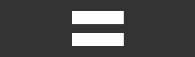
<style>
.page{position:relative;width:195px;height:57px;background:#333333}
.page>*{position:absolute;margin:0}
.t1{font:116.7px "PTSans-Bold";color:#fefefe}
</style>
<div class="page">
<p class="t1" style="left:72px;top:11px;width:52px;height:35px">=</p>
</div>
